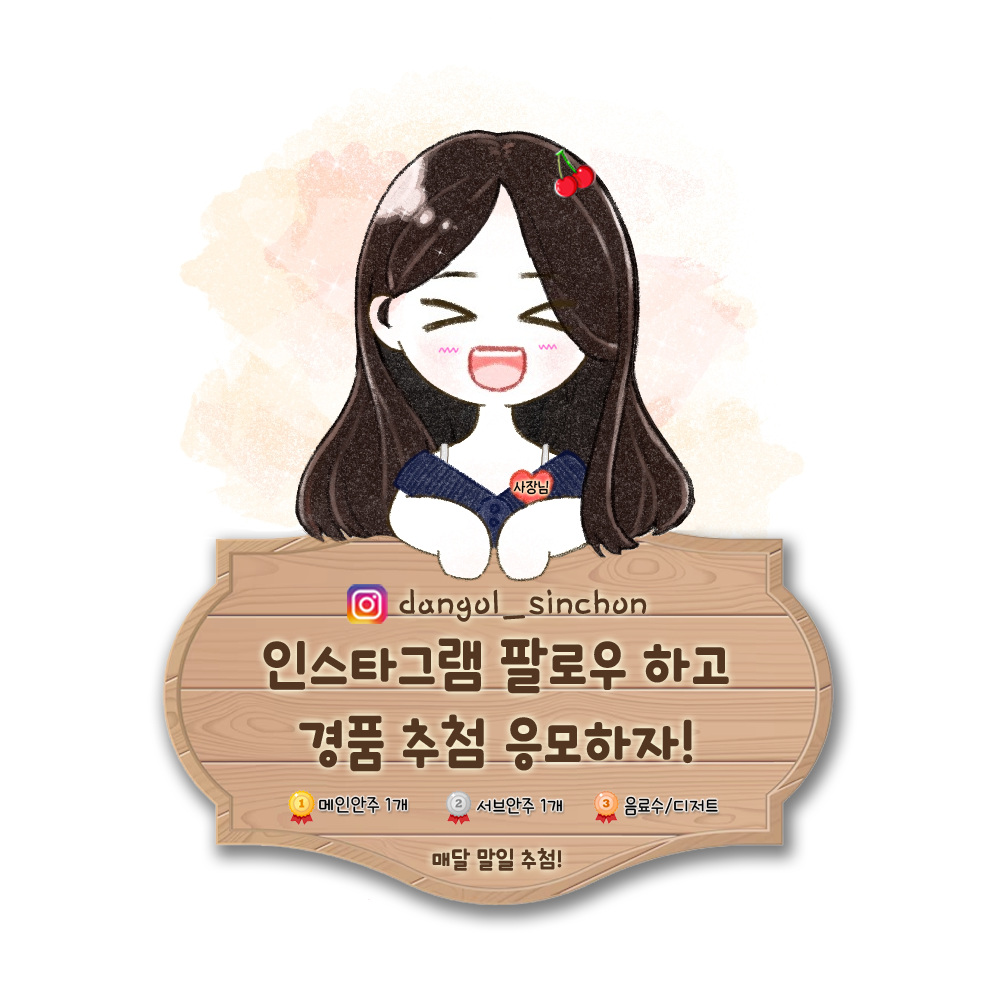
<style>
.page{position:relative;width:1000px;height:1000px;background:#ffffff}
.page>*{position:absolute;margin:0}
.t1{font:15px "THEMiss";color:#000000}
.t2{font:45px "Pix_HUFriend132";color:#533621}
.t3{font:60px "icTTHayanbunpilB";color:#533621}
.t4{font:20px "icTTHayanbunpilL";color:#000000}
.t5{font:24px "icTTHayanbunpilB";color:#533621}
</style>
<div class="page">
<p class="t1" style="left:513px;top:480px;width:36px;height:15px">사장님</p>
<p class="t2" style="left:399px;top:589px;width:248px;height:33px">dangol_sinchon</p>
<p class="t3" style="left:263px;top:637px;width:466px;height:57px">인스타그램 팔로우 하고</p>
<p class="t3" style="left:299px;top:714px;width:394px;height:58px">경품 추첨 응모하자!</p>
<p class="t4" style="left:319px;top:796px;width:88px;height:17px">메인안주 1개</p>
<p class="t4" style="left:477px;top:797px;width:85px;height:17px">서브안주 1개</p>
<p class="t4" style="left:624px;top:796px;width:94px;height:20px">음료수/디저트</p>
<p class="t5" style="left:432px;top:848px;width:130px;height:23px">매달 말일 추첨!</p>
</div>
